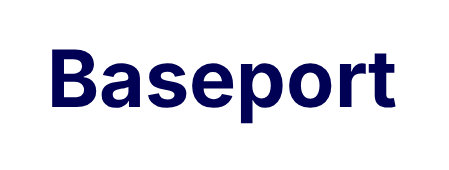
<style>
.page{position:relative;width:449px;height:170px;background:#ffffff}
.page>*{position:absolute;margin:0}
.t1{font:79px "Inter-Bold";color:#000155}
</style>
<div class="page">
<p class="t1" style="left:52px;top:49px;width:344px;height:75px">Baseport</p>
</div>
